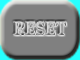
<style>
.page{position:relative;width:80px;height:60px;background:#808080}
.page>*{position:absolute;margin:0}
.t1{font:18px "MyungjoXB-HM"}
</style>
<div class="page">
<p class="t1" style="left:13px;top:21px;width:53px;height:14px">RESET</p>
</div>
